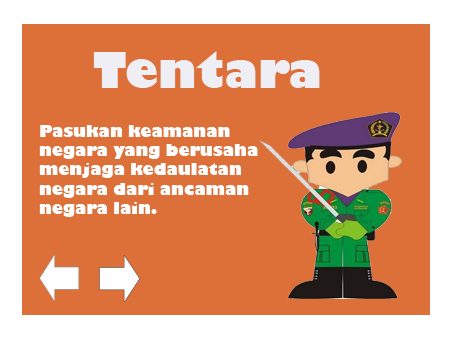
<style>
.page{position:relative;width:454px;height:340px;background:#dd6f39}
.page>*{position:absolute;margin:0}
.t1{font:48px "GillSans-UltraBold";color:#f0eef5}
.t2{font:16px "GillSans-UltraBold";color:#ffffff}
</style>
<div class="page">
<p class="t1" style="left:93px;top:51px;width:227px;height:37px">Tentara</p>
<p class="t2" style="left:39px;top:125px;width:219px;height:92px">Pasukan keamanan<br>negara yang berusaha<br>menjaga kedaulatan<br>negara dari ancaman <br>negara lain.</p>
</div>
